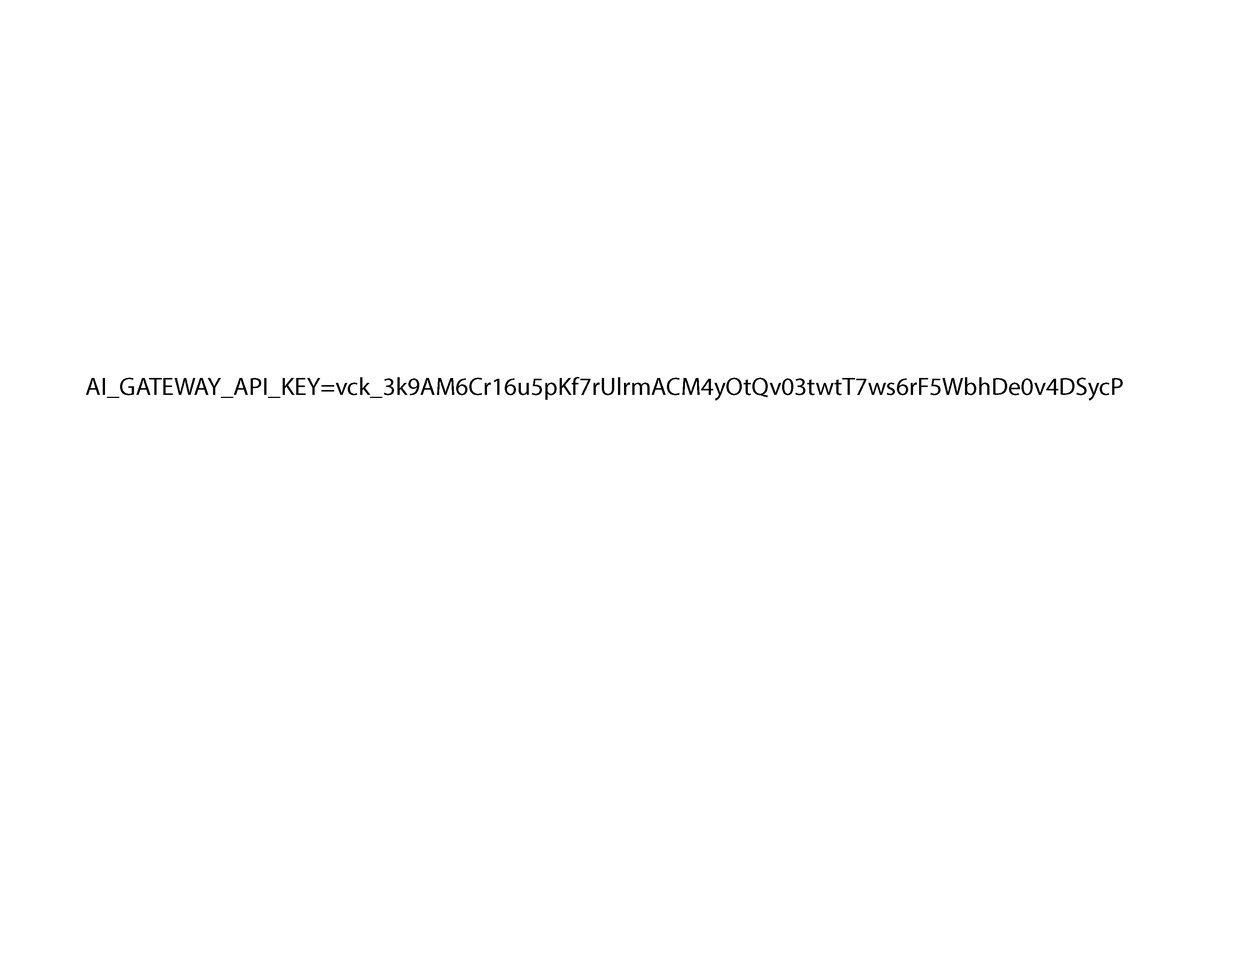
<style>
.page{position:relative;width:1242px;height:960px;background:#ffffff}
.page>*{position:absolute;margin:0}
.t1{font:25.1px "MyriadPro-Regular";color:#000000}
</style>
<div class="page">
<p class="t1" style="left:86px;top:377px;width:1037px;height:24px">AI_GATEWAY_API_KEY=vck_3k9AM6Cr16u5pKf7rUlrmACM4yOtQv03twtT7ws6rF5WbhDe0v4DSycP</p>
</div>
